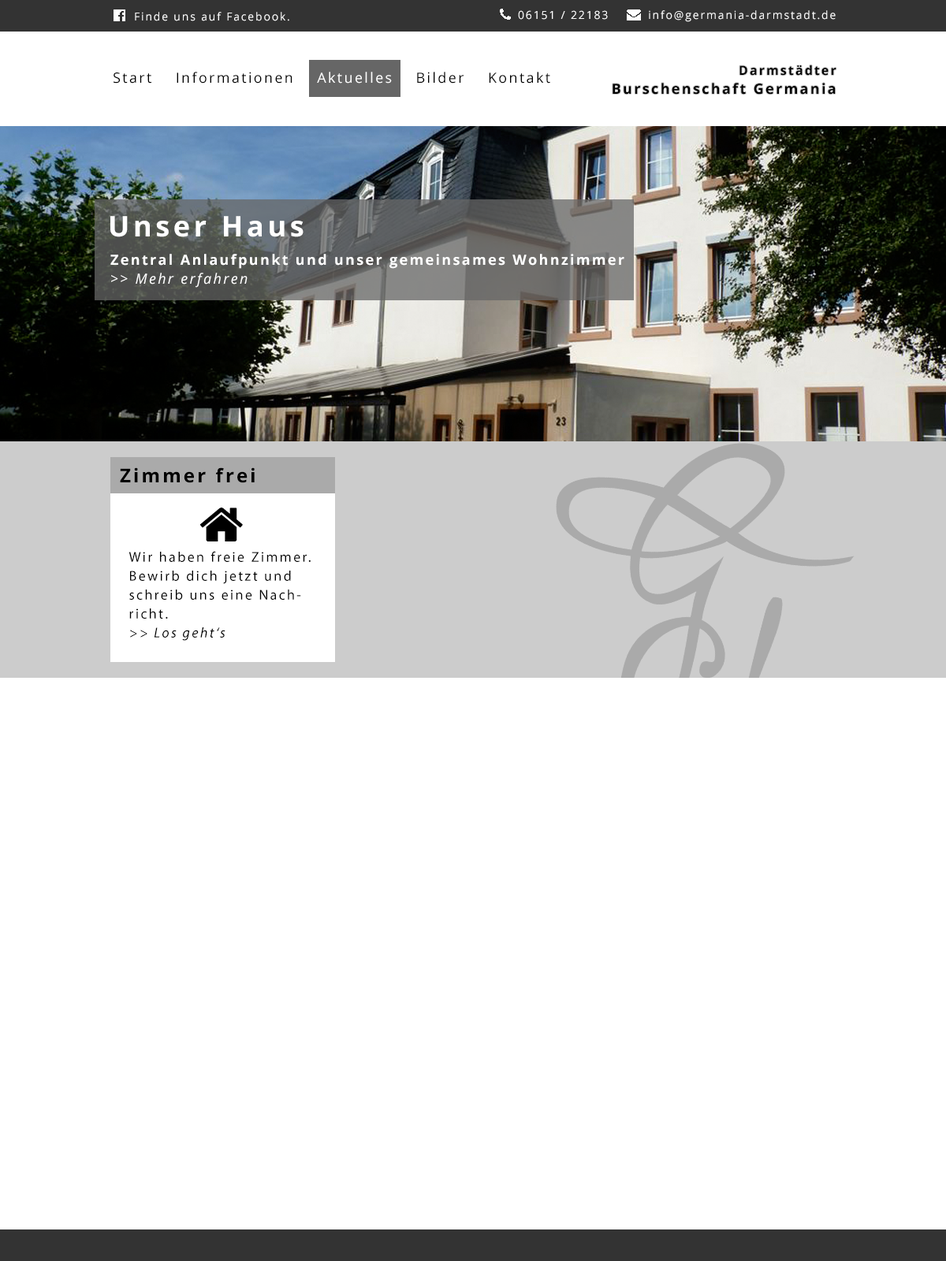
<style>
.page{position:relative;width:946px;height:1261px;background:#ffffff}
.page>*{position:absolute;margin:0}
.t1{font:11px "OpenSans";letter-spacing:0.13em;color:#ffffff}
.t2{font:14.2px/18.9px "OpenSans-Bold";letter-spacing:0.13em;color:#000000}
.t3{font:12.6px/18.9px "OpenSans-Bold";letter-spacing:0.13em;color:#000000}
.t4{font:14.2px "OpenSans";letter-spacing:0.13em;color:#000000}
.t5{font:14.2px "OpenSans";letter-spacing:0.13em;color:#ffffff}
.t6{font:28.4px "OpenSans-Bold";letter-spacing:0.13em;color:#ffffff}
.t7{font:14.2px/18.9px "OpenSans-Bold";letter-spacing:0.13em;color:#ffffff}
.t8{font:14.2px/18.9px "OpenSans-Italic";letter-spacing:0.13em;color:#ffffff}
.t9{font:18.9px "OpenSans-Bold";letter-spacing:0.13em;color:#000000}
.t10{font:14.2px/18.9px "MyriadPro-Regular";letter-spacing:0.13em;color:#000000}
.t11{font:14.2px/18.9px "MyriadPro-It";letter-spacing:0.13em;color:#000000}
</style>
<div class="page">
<p class="t1" style="left:135px;top:12px;width:154px;height:9px">Finde uns auf Facebook.</p>
<p class="t1" style="left:518px;top:10px;width:317px;height:12px">06151 / 22183         info@germania-darmstadt.de</p>
<p class="t2" style="left:612px;top:65px;width:224px;height:30px;text-align:right"><span class="t3">Darmstädter<br></span>Burschenschaft Germania</p>
<p class="t4" style="left:113px;top:72px;width:437px;height:12px">Start    Informationen    <span class="t5">Aktuelles</span>    Bilder    Kontakt</p>
<p class="t6" style="left:110px;top:216px;width:193px;height:21px">Unser Haus</p>
<p class="t7" style="left:110px;top:254px;width:514px;height:34px">Zentral Anlaufpunkt und unser gemeinsames Wohnzimmer<br><span class="t8">&gt;&gt; Mehr erfahren</span></p>
<p class="t9" style="left:120px;top:467px;width:135px;height:16px">Zimmer frei</p>
<p class="t9" style="left:120px;top:467px;width:135px;height:16px">Zimmer frei</p>
<p class="t10" style="left:128px;top:551px;width:183px;height:90px">Wir haben freie Zimmer. Bewirb dich jetzt und schreib uns eine Nachricht.<br><span class="t11">&gt;&gt; Los geht‘s</span></p>
<p class="t10" style="left:128px;top:551px;width:183px;height:90px">Wir haben freie Zimmer. Bewirb dich jetzt und schreib uns eine Nachricht.<br><span class="t11">&gt;&gt; Los geht‘s</span></p>
</div>
